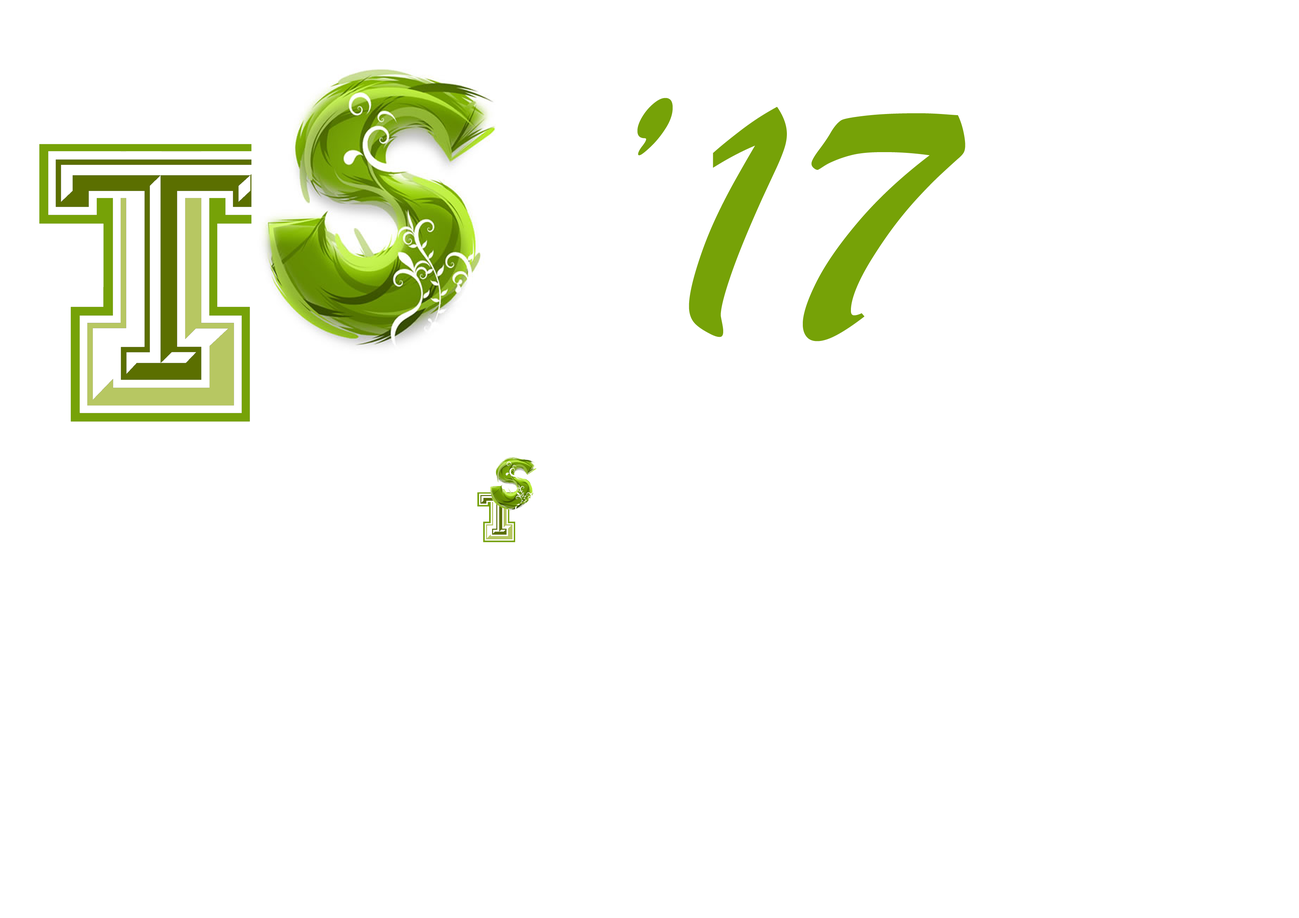
<style>
.page{position:relative;width:1299px;height:918px;background:#ffffff}
.page>*{position:absolute;margin:0}
.t1{font:364.1px "BrushScriptMT";color:#76a207}
</style>
<div class="page">
<p class="t1" style="left:637px;top:98px;width:328px;height:243px">’17</p>
</div>
